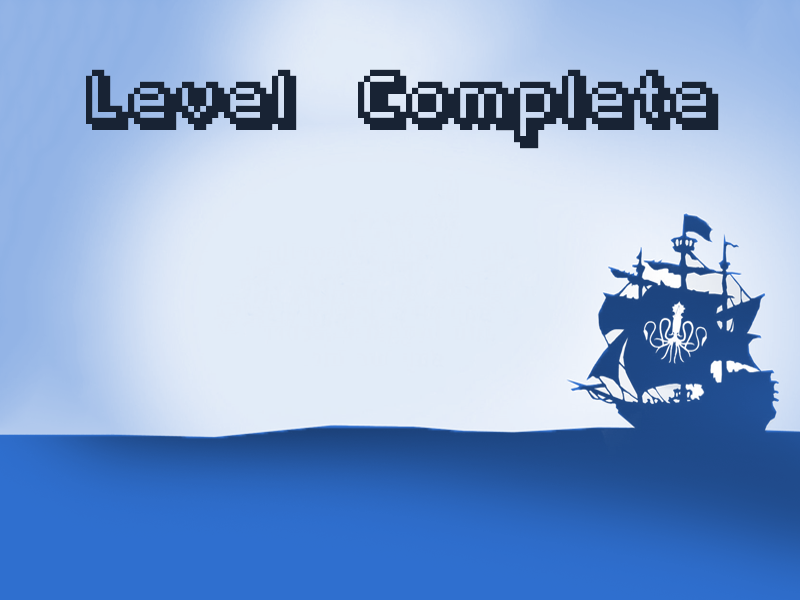
<style>
.page{position:relative;width:800px;height:600px}
.page>*{position:absolute;margin:0}
.t1{font:48px "Fipps-Regular";color:#182334}
</style>
<div class="page">
<p class="t1" style="left:86px;top:69px;width:211px;height:61px">Level</p>
<p class="t1" style="left:358px;top:69px;width:361px;height:80px">Complete</p>
</div>
